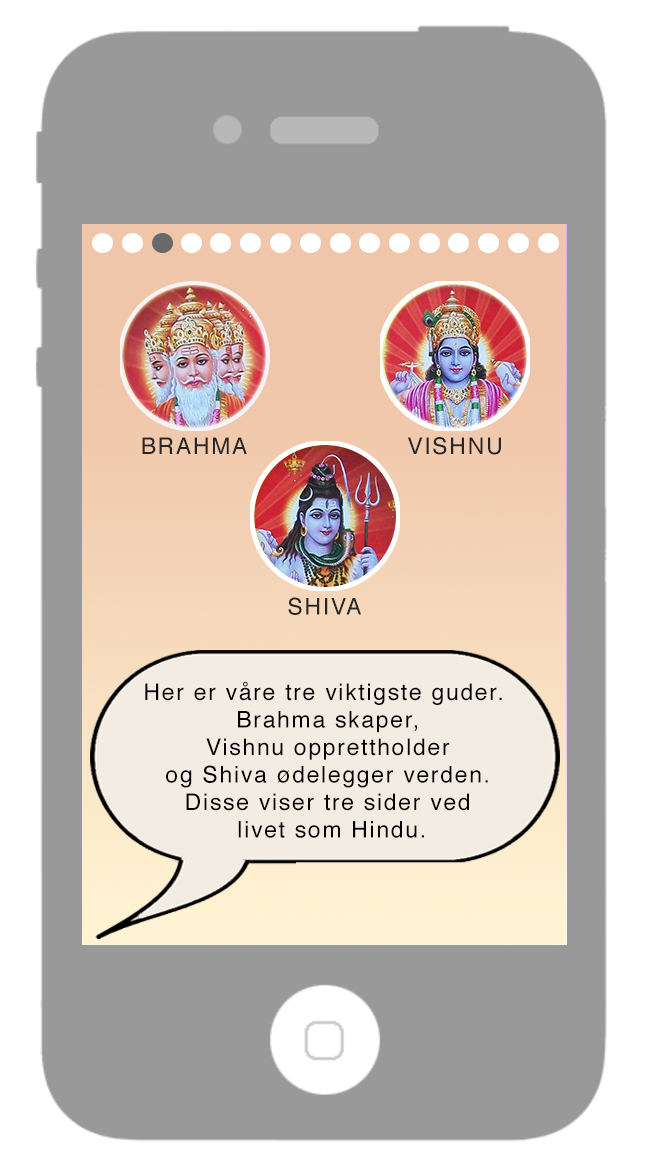
<style>
.page{position:relative;width:646px;height:1172px;background:#999999}
.page>*{position:absolute;margin:0}
.t1{font:22.9px "Helvetica";letter-spacing:0.075em;color:#262626}
.t2{font:22.9px "Helvetica";letter-spacing:0.075em;color:#000000}
</style>
<div class="page">
<p class="t1" style="left:142px;top:437px;width:105px;height:17px">BRAHMA</p>
<p class="t1" style="left:408px;top:437px;width:93px;height:18px">VISHNU</p>
<p class="t1" style="left:288px;top:597px;width:73px;height:18px">SHIVA</p>
<p class="t2" style="left:145px;top:681px;width:357px;height:157px;text-align:center">Her er våre tre viktigste guder. <br>Brahma skaper,<br>Vishnu opprettholder<br>og Shiva ødelegger verden.<br>Disse viser tre sider ved<br> livet som Hindu.</p>
</div>
